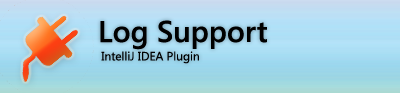
<style>
.page{position:relative;width:400px;height:93px}
.page>*{position:absolute;margin:0}
.t1{font:12px "SegoeUI";color:#000000}
.t2{font:30px "SegoeUI-SemiBold";color:#000000}
</style>
<div class="page">
<p class="t1" style="left:100px;top:20px;width:167px;height:44px"><span class="t2">Log Support<br></span> IntelliJ IDEA Plugin</p>
</div>
